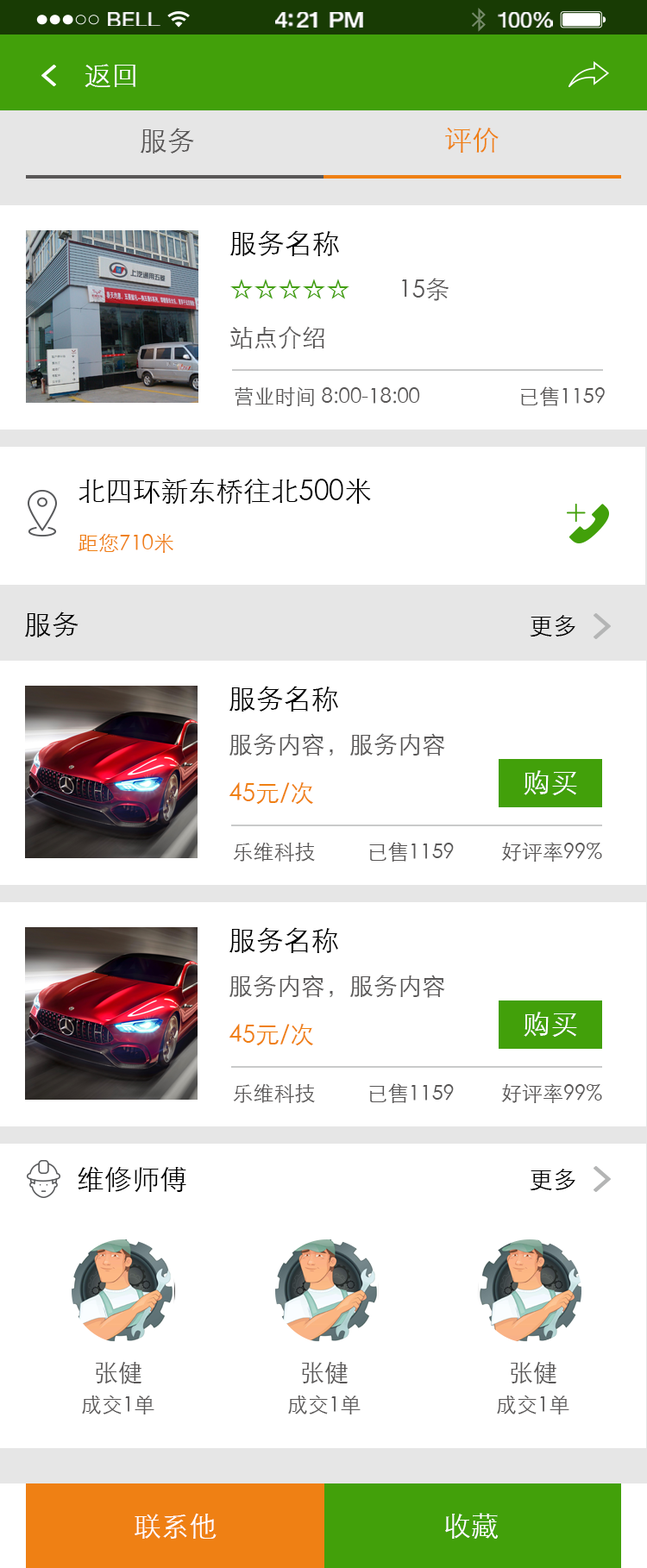
<style>
.page{position:relative;width:647px;height:1568px;background:#ffffff}
.page>*{position:absolute;margin:0}
.t1{font:20.1px "HelveticaNeue";letter-spacing:0.02em;color:#ffffff;scale:1.06 1}
.t2{font:21.8px "HelveticaNeue-Medium";letter-spacing:-0.02em;color:#ffffff;scale:1.06 1}
.t3{font:20.9px "HelveticaNeue";letter-spacing:-0.02em;color:#ffffff;scale:1.06 1}
.t4{font:27.6px "STXihei";color:#ffffff}
.t5{font:27.6px "STXihei";color:#595757}
.t6{font:27.6px "STXihei";color:#ef8014}
.t7{font:24.1px/48.3px "STXihei";color:#595757}
.t8{font:27.6px/48.3px "STXihei";color:#000000}
.t9{font:24.1px/48.3px "STXihei";color:#42a00a}
.t10{font:20.7px "STXihei";color:#595757}
.t11{font:27.6px "STXihei";color:#000000}
.t12{font:20.7px "STXihei";color:#ef8013}
.t13{font:24.1px "STXihei";color:#000000}
.t14{font:24.1px/48.3px "STXihei";color:#ef8013}
.t15{font:20.7px/34.5px "STXihei";color:#595757}
.t16{font:24.1px/34.5px "STXihei";color:#595757}
.t17{font:27.6px "STXihei";color:#fffefe}
</style>
<div class="page">
<p class="t1" style="left:108px;top:12px;width:52px;height:14px">BELL</p>
<p class="t2" style="left:275px;top:12px;width:88px;height:16px">4:21 PM</p>
<p class="t3" style="left:498px;top:12px;width:55px;height:16px">100%</p>
<p class="t4" style="left:85px;top:64px;width:50px;height:23px">返回</p>
<p class="t5" style="left:141px;top:128px;width:53px;height:26px">服务</p>
<p class="t6" style="left:445px;top:128px;width:54px;height:25px">评价</p>
<p class="t7" style="left:230px;top:230px;width:218px;height:119px"><span class="t8">服务名称<br></span><span class="t9">☆☆☆☆☆</span>        15条<br>站点介绍</p>
<p class="t10" style="left:235px;top:386px;width:370px;height:20px">营业时间 8:00-18:00                   已售1159</p>
<p class="t11" style="left:78px;top:479px;width:293px;height:26px">北四环新东桥往北500米</p>
<p class="t12" style="left:78px;top:533px;width:95px;height:20px">距您710米</p>
<p class="t11" style="left:25px;top:612px;width:53px;height:25px">服务</p>
<p class="t13" style="left:530px;top:615px;width:45px;height:22px">更多</p>
<p class="t7" style="left:229px;top:686px;width:216px;height:119px"><span class="t8">服务名称<br></span>服务内容，服务内容<br><span class="t14">45元/次</span></p>
<p class="t4" style="left:524px;top:770px;width:53px;height:25px">购买</p>
<p class="t10" style="left:233px;top:842px;width:369px;height:20px">乐维科技          已售1159         好评率99%</p>
<p class="t7" style="left:229px;top:927px;width:216px;height:119px"><span class="t8">服务名称<br></span>服务内容，服务内容<br><span class="t14">45元/次</span></p>
<p class="t4" style="left:524px;top:1012px;width:53px;height:25px">购买</p>
<p class="t10" style="left:233px;top:1083px;width:369px;height:20px">乐维科技          已售1159         好评率99%</p>
<p class="t11" style="left:78px;top:1166px;width:108px;height:26px">维修师傅</p>
<p class="t13" style="left:530px;top:1169px;width:45px;height:22px">更多</p>
<p class="t15" style="left:82px;top:1362px;width:72px;height:52px;text-align:center"><span class="t16">张健<br></span>成交1单</p>
<p class="t15" style="left:288px;top:1362px;width:73px;height:52px;text-align:center"><span class="t16">张健<br></span>成交1单</p>
<p class="t15" style="left:497px;top:1362px;width:72px;height:52px;text-align:center"><span class="t16">张健<br></span>成交1单</p>
<p class="t17" style="left:135px;top:1513px;width:81px;height:26px">联系他</p>
<p class="t17" style="left:445px;top:1513px;width:54px;height:26px">收藏</p>
</div>
